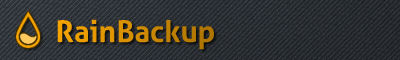
<style>
.page{position:relative;width:400px;height:60px}
.page>*{position:absolute;margin:0}
.t1{font:30px "Aller-Bold"}
</style>
<div class="page">
<p class="t1" style="left:57px;top:19px;width:157px;height:31px">RainBackup</p>
</div>
